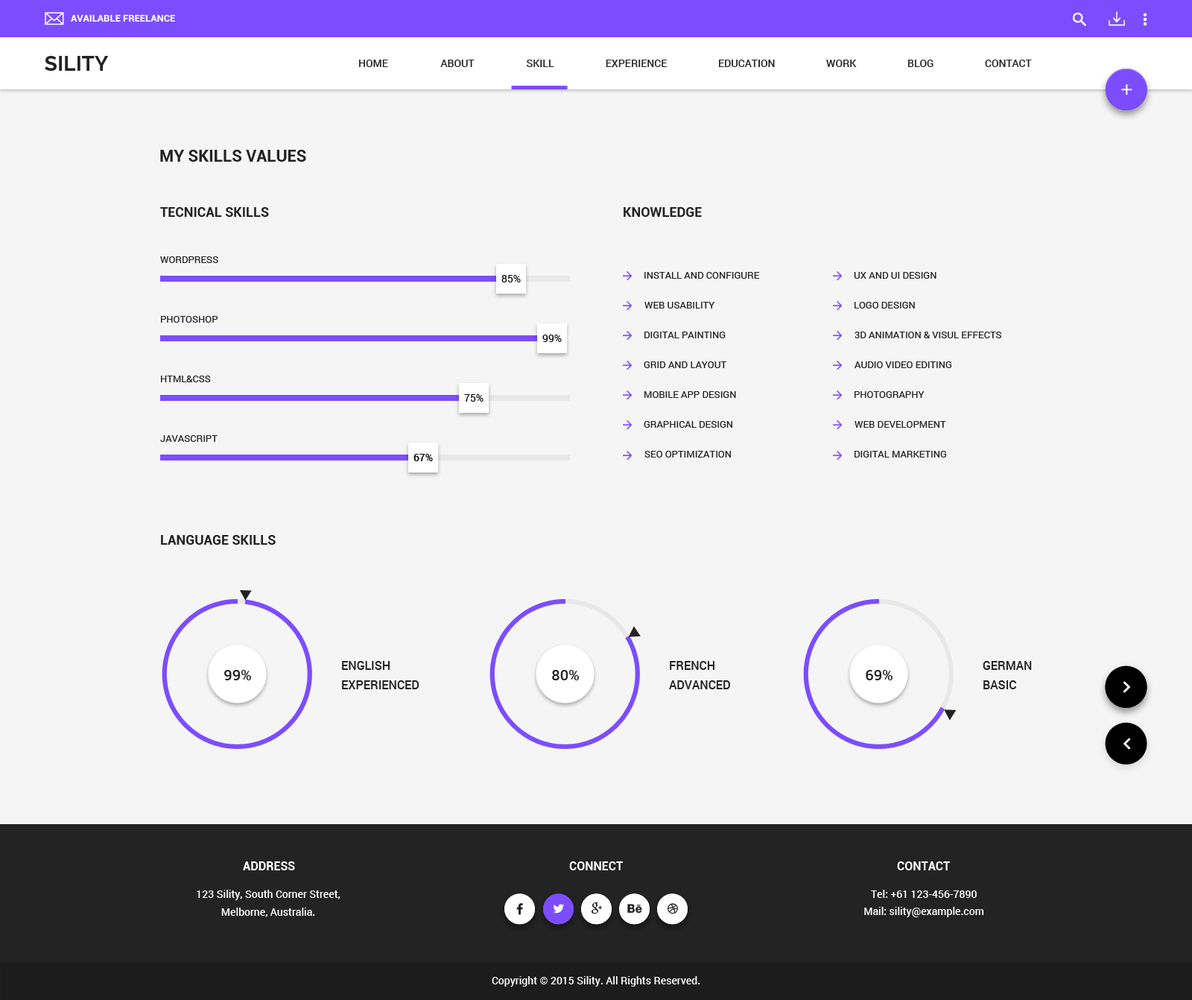
<style>
.page{position:relative;width:1192px;height:1000px;background:#f5f5f5}
.page>*{position:absolute;margin:0}
.t1{font:9.7px "Roboto-Bold";color:#ffffff;text-transform:uppercase}
.t2{font:20.9px "Raleway-Bold";color:#232323}
.t3{font:10.4px "Roboto-Medium";color:#232323;text-transform:uppercase}
.t4{font:16.4px "Roboto-Bold";color:#232323}
.t5{font:13.4px "Roboto-Bold";color:#232323;text-transform:uppercase}
.t6{font:9.7px "Roboto-Regular";color:#232323;text-transform:uppercase}
.t7{font:10.4px "Roboto-Regular";color:#000000;text-transform:uppercase}
.t8{font:10.4px "Roboto-Medium";color:#000000;text-transform:uppercase}
.t9{font:11.9px/19.4px "Roboto-Medium";color:#232323;text-transform:uppercase}
.t10{font:14.9px "Roboto-Medium";color:#232323;text-transform:uppercase}
.t11{font:11.9px "Roboto-Bold";color:#ffffff;text-transform:uppercase}
.t12{font:10.4px/17.9px "Roboto-Medium";color:#ffffff}
.t13{font:10.4px "Roboto-Medium";color:#ffffff}
</style>
<div class="page">
<p class="t1" style="left:71px;top:15px;width:104px;height:7px">available freelance</p>
<p class="t2" style="left:45px;top:56px;width:64px;height:15px">SILITY</p>
<p class="t3" style="left:359px;top:60px;width:29px;height:7px">home</p>
<p class="t3" style="left:440px;top:60px;width:35px;height:7px">about</p>
<p class="t3" style="left:527px;top:60px;width:27px;height:7px">skill</p>
<p class="t3" style="left:606px;top:60px;width:62px;height:7px">experience</p>
<p class="t3" style="left:719px;top:60px;width:56px;height:7px">education</p>
<p class="t3" style="left:826px;top:60px;width:31px;height:7px">work</p>
<p class="t3" style="left:908px;top:60px;width:26px;height:7px">blog</p>
<p class="t3" style="left:985px;top:60px;width:47px;height:7px">Contact</p>
<p class="t4" style="left:160px;top:150px;width:146px;height:12px">MY SKILLS VALUES</p>
<p class="t5" style="left:160px;top:207px;width:109px;height:10px">tecnical skills</p>
<p class="t5" style="left:624px;top:207px;width:78px;height:10px">KNOWLEDGE</p>
<p class="t6" style="left:160px;top:256px;width:58px;height:7px">wordpress</p>
<p class="t7" style="left:502px;top:275px;width:19px;height:7px">85%</p>
<p class="t6" style="left:645px;top:272px;width:115px;height:7px">install and configure</p>
<p class="t6" style="left:854px;top:272px;width:83px;height:7px">ux and ui design</p>
<p class="t6" style="left:645px;top:302px;width:70px;height:7px">web usability</p>
<p class="t6" style="left:855px;top:302px;width:60px;height:7px">logo design</p>
<p class="t6" style="left:161px;top:316px;width:57px;height:7px">photoshop</p>
<p class="t7" style="left:543px;top:335px;width:19px;height:7px">99%</p>
<p class="t6" style="left:645px;top:332px;width:81px;height:6px">digital painting</p>
<p class="t6" style="left:855px;top:332px;width:147px;height:6px">3d animation &amp; visul effects</p>
<p class="t6" style="left:644px;top:361px;width:83px;height:7px">grid and layout</p>
<p class="t6" style="left:855px;top:361px;width:97px;height:7px">audio video editing</p>
<p class="t6" style="left:161px;top:376px;width:50px;height:6px">html&amp;css</p>
<p class="t7" style="left:464px;top:394px;width:20px;height:8px">75%</p>
<p class="t6" style="left:645px;top:391px;width:91px;height:7px">mobile app design</p>
<p class="t6" style="left:855px;top:391px;width:70px;height:7px">photography</p>
<p class="t6" style="left:644px;top:421px;width:89px;height:7px">graphical design</p>
<p class="t6" style="left:855px;top:421px;width:91px;height:7px">web development</p>
<p class="t6" style="left:160px;top:435px;width:58px;height:7px">javascript</p>
<p class="t8" style="left:414px;top:454px;width:19px;height:7px">67%</p>
<p class="t6" style="left:645px;top:451px;width:86px;height:7px">seo optimization</p>
<p class="t6" style="left:855px;top:451px;width:91px;height:7px">digital marketing</p>
<p class="t5" style="left:161px;top:535px;width:115px;height:10px">LANGUAGE SKILLS</p>
<p class="t9" style="left:342px;top:661px;width:78px;height:28px">ENGLISH <br>EXPERIENCeD</p>
<p class="t9" style="left:669px;top:661px;width:61px;height:28px">FRENCH<br>ADVANCED</p>
<p class="t9" style="left:983px;top:661px;width:49px;height:28px">GERMAN<br>BASIC</p>
<p class="t10" style="left:224px;top:670px;width:27px;height:10px">99%</p>
<p class="t10" style="left:552px;top:670px;width:27px;height:10px">80%</p>
<p class="t10" style="left:866px;top:670px;width:27px;height:10px">69%</p>
<p class="t11" style="left:243px;top:861px;width:52px;height:9px">Address</p>
<p class="t11" style="left:569px;top:861px;width:54px;height:9px">connect</p>
<p class="t11" style="left:897px;top:861px;width:53px;height:9px">contact</p>
<p class="t12" style="left:197px;top:890px;width:144px;height:27px;text-align:center">123 Sility, South Corner Street,<br>Melborne, Australia.</p>
<p class="t13" style="left:871px;top:890px;width:106px;height:8px">Tel: +61 123-456-7890</p>
<p class="t13" style="left:864px;top:907px;width:120px;height:10px">Mail: sility@example.com</p>
<p class="t13" style="left:492px;top:976px;width:209px;height:11px">Copyright © 2015 Sility. All Rights Reserved.</p>
</div>
